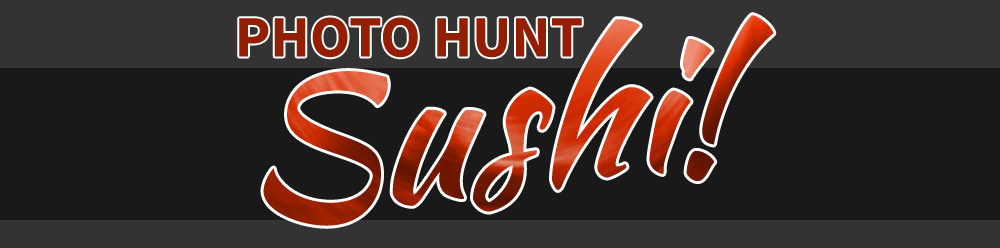
<style>
.page{position:relative;width:1000px;height:248px;background:#191919}
.page>*{position:absolute;margin:0}
.t1{font:58.8px "SourceSansPro-Bold";color:#941f00}
.t2{font:187.9px "KaushanScript-Regular"}
</style>
<div class="page">
<p class="t1" style="left:239px;top:17px;width:343px;height:41px">PHOTO HUNT</p>
<p class="t2" style="left:263px;top:15px;width:511px;height:211px">Sushi!</p>
</div>
